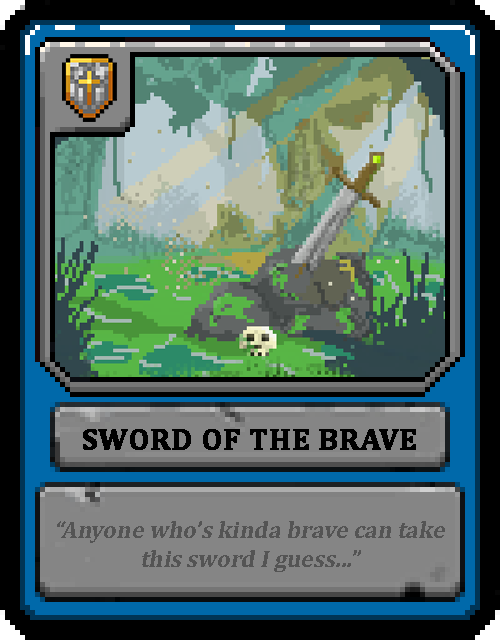
<style>
.page{position:relative;width:500px;height:640px;background:#000000}
.page>*{position:absolute;margin:0}
.t1{font:30px "Cambria-Bold";color:#000000;text-transform:uppercase;font-weight:bold}
.t2{font:24px "Cambria-Bold";color:#545454;font-style:italic}
</style>
<div class="page">
<p class="t1" style="left:83px;top:429px;width:333px;height:21px">Sword of the brave</p>
<p class="t2" style="left:57px;top:521px;width:388px;height:51px;text-align:center">“Anyone who’s kinda brave can take this sword I guess...”</p>
</div>
